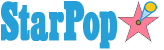
<style>
.page{position:relative;width:164px;height:50px;background:#ffffff}
.page>*{position:absolute;margin:0}
.t1{font:42.6px "Cairo";letter-spacing:-0.01em;color:#25a0d9;font-weight:bold;scale:0.73 1}
.t2{font:42.6px "Cairo";letter-spacing:-0.05em;color:#25a0d9;font-weight:bold;scale:0.73 1}
.t3{font:42.6px "Cairo";letter-spacing:-0.025em;color:#25a0d9;font-weight:bold;scale:0.73 1}
.t4{font:42.6px "Cairo";letter-spacing:-0.1em;color:#25a0d9;font-weight:bold;scale:0.73 1}
.t5{font:42.6px "Cairo";color:#25a0d9;font-weight:bold;scale:0.73 1}
</style>
<div class="page">
<p class="t1" style="left:1px;top:1px;width:117px;height:48px"><span class="t2">S</span>ta<span class="t3">r</span><span class="t4">P</span><span class="t3">o</span><span class="t5">p</span></p>
</div>
